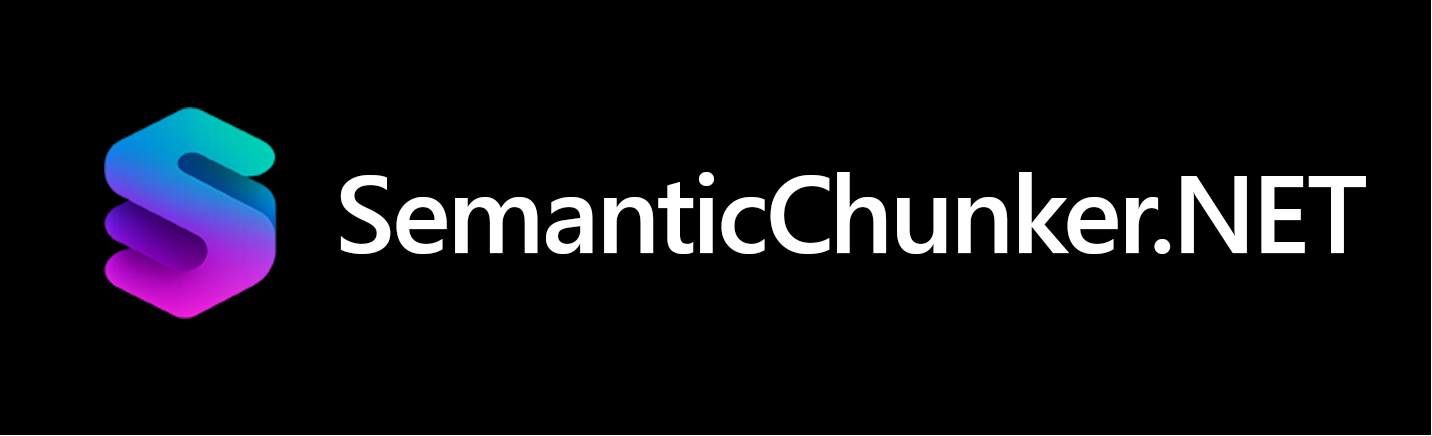
<style>
.page{position:relative;width:1432px;height:436px;background:#000000}
.page>*{position:absolute;margin:0}
.t1{font:110.2px "SegoeUI-Semibold";letter-spacing:-0.01em;color:#ffffff}
</style>
<div class="page">
<p class="t1" style="left:340px;top:172px;width:1026px;height:82px">SemanticChunker.NET</p>
</div>
